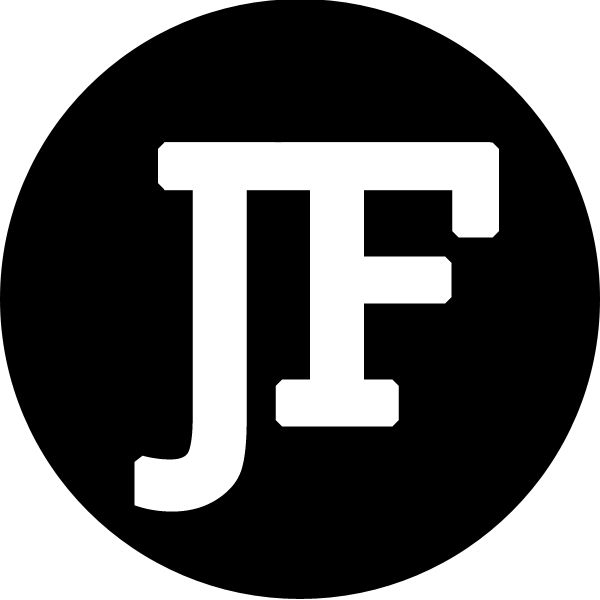
<style>
.page{position:relative;width:600px;height:600px;background:#000000}
.page>*{position:absolute;margin:0}
.t1{font:399.4px "Rockwell";letter-spacing:-0.04em;color:#ffffff;font-weight:bold}
</style>
<div class="page">
<p class="t1" style="left:134px;top:142px;width:365px;height:370px">JF</p>
</div>
